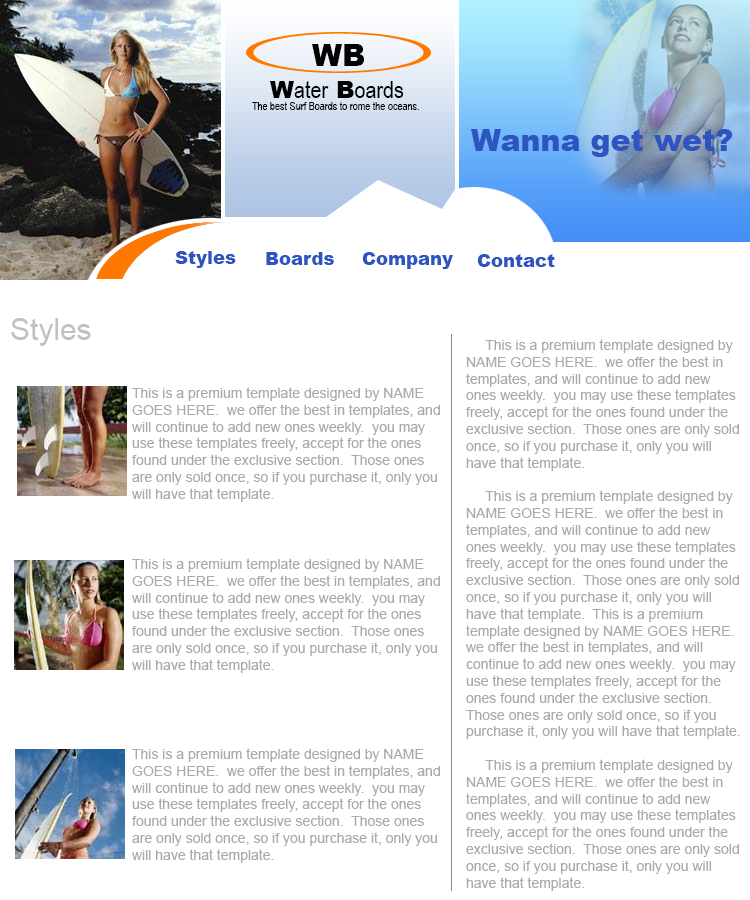
<style>
.page{position:relative;width:750px;height:900px;background:#ffffff}
.page>*{position:absolute;margin:0}
.t1{font:30px "Arial-Black";color:#000000}
.t2{font:24px "ArialNarrow";color:#000000}
.t3{font:24px "Arial-Black";color:#000000}
.t4{font:11px "ArialNarrow";color:#000000}
.t5{font:30px "Arial-Black";color:#2e54c1}
.t6{font:18px "Arial-Black";color:#2e54c1}
.t7{font:30px "ArialMT";color:#c1c1c1}
.t8{font:14px "ArialMT";color:#aaaaaa}
</style>
<div class="page">
<p class="t1" style="left:312px;top:44px;width:52px;height:22px">WB</p>
<p class="t2" style="left:270px;top:81px;width:134px;height:17px"><span class="t3">W</span>ater<span class="t3"> B</span>oards</p>
<p class="t4" style="left:252px;top:102px;width:167px;height:8px">The best Surf Boards to rome the oceans.</p>
<p class="t5" style="left:471px;top:129px;width:262px;height:28px">Wanna get wet?</p>
<p class="t6" style="left:175px;top:251px;width:61px;height:17px">Styles</p>
<p class="t6" style="left:266px;top:252px;width:68px;height:13px">Boards</p>
<p class="t6" style="left:362px;top:252px;width:91px;height:17px">Company</p>
<p class="t6" style="left:477px;top:254px;width:78px;height:13px">Contact</p>
<p class="t7" style="left:11px;top:318px;width:80px;height:28px">Styles</p>
<p class="t8" style="left:466px;top:339px;width:274px;height:552px">This is a premium template designed by NAME GOES HERE.  we offer the best in templates, and will continue to add new ones weekly.  you may use these templates freely, accept for the ones found under the exclusive section.  Those ones are only sold once, so if you purchase it, only you will have that template.  <br><br>     This is a premium template designed by NAME GOES HERE.  we offer the best in templates, and will continue to add new ones weekly.  you may use these templates freely, accept for the ones found under the exclusive section.  Those ones are only sold once, so if you purchase it, only you will have that template.  This is a premium template designed by NAME GOES HERE.  we offer the best in templates, and will continue to add new ones weekly.  you may use these templates freely, accept for the ones found under the exclusive section.  Those ones are only sold once, so if you purchase it, only you will have that template.  <br><br>     This is a premium template designed by NAME GOES HERE.  we offer the best in templates, and will continue to add new ones weekly.  you may use these templates freely, accept for the ones found under the exclusive section.  Those ones are only sold once, so if you purchase it, only you will have that template.</p>
<p class="t8" style="left:132px;top:387px;width:308px;height:115px">This is a premium template designed by NAME GOES HERE.  we offer the best in templates, and will continue to add new ones weekly.  you may use these templates freely, accept for the ones found under the exclusive section.  Those ones are only sold once, so if you purchase it, only you will have that template.</p>
<p class="t8" style="left:132px;top:558px;width:308px;height:115px">This is a premium template designed by NAME GOES HERE.  we offer the best in templates, and will continue to add new ones weekly.  you may use these templates freely, accept for the ones found under the exclusive section.  Those ones are only sold once, so if you purchase it, only you will have that template.</p>
<p class="t8" style="left:132px;top:748px;width:308px;height:115px">This is a premium template designed by NAME GOES HERE.  we offer the best in templates, and will continue to add new ones weekly.  you may use these templates freely, accept for the ones found under the exclusive section.  Those ones are only sold once, so if you purchase it, only you will have that template.</p>
</div>
